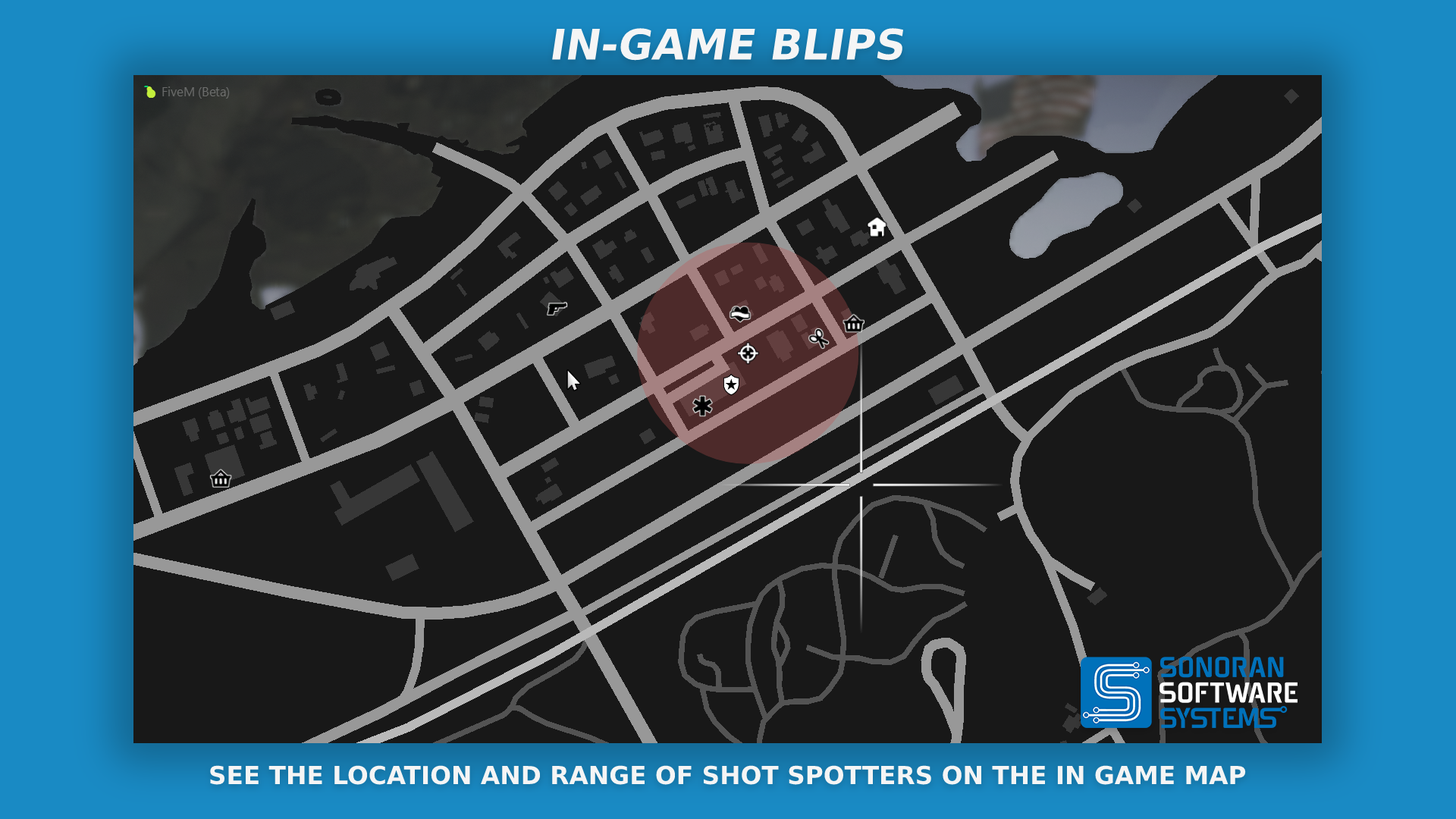
<style>
.page{position:relative;width:1456px;height:819px;background:#181818}
.page>*{position:absolute;margin:0}
.t1{font:42.4px "ProductSans-Bold";color:#f5f5f5;text-transform:uppercase}
.t2{font:24.8px "ProductSans-Bold";color:#f5f5f5;text-transform:uppercase}
</style>
<div class="page">
<p class="t1" style="left:552px;top:28px;width:352px;height:33px">In-game Blips</p>
<p class="t2" style="left:210px;top:765px;width:1036px;height:20px">See the location and range of shot spotters on the in game map</p>
</div>
